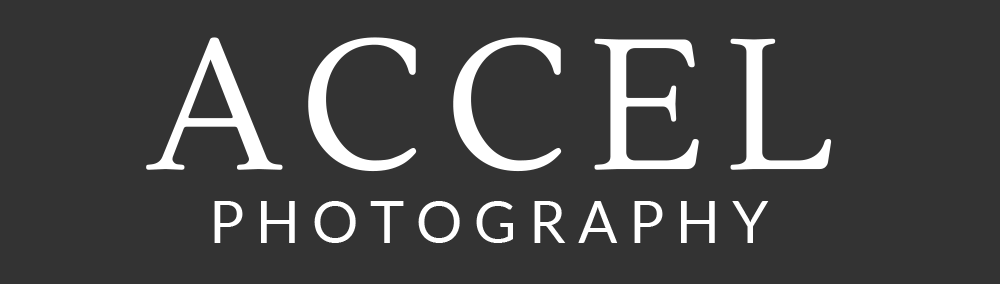
<style>
.page{position:relative;width:1000px;height:284px;background:#333333}
.page>*{position:absolute;margin:0}
.t1{font:185.3px "Lustria-Regular";letter-spacing:0.1em;color:#ffffff}
.t2{font:58.3px "Lato-Regular";letter-spacing:0.2em;color:#ffffff}
</style>
<div class="page">
<p class="t1" style="left:146px;top:37px;width:686px;height:135px">ACCEL</p>
<p class="t2" style="left:214px;top:201px;width:555px;height:42px">PHOTOGRAPHY</p>
</div>
